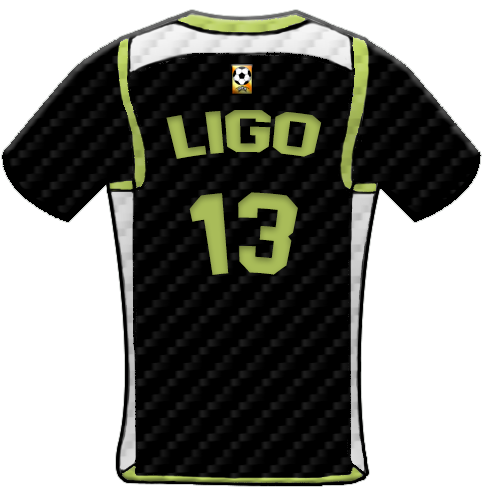
<style>
.page{position:relative;width:482px;height:494px;background:#ffffff}
.page>*{position:absolute;margin:0}
.t1{font:59.4px "AdidasHalfBlock2016";color:#a9bc59;scale:1.13 1}
.t2{font:113.8px "AdidasHalfBlock2016";color:#a9bc59}
</style>
<div class="page">
<p class="t1" style="left:166px;top:110px;width:156px;height:49px">Ligo</p>
<p class="t2" style="left:189px;top:192px;width:109px;height:83px">13</p>
</div>
